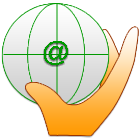
<style>
.page{position:relative;width:140px;height:140px;background:#ffffff}
.page>*{position:absolute;margin:0}
.t1{font:27.8px "ArialMT";color:#009900}
</style>
<div class="page">
<p class="t1" style="left:44px;top:41px;width:24px;height:24px">@</p>
</div>
